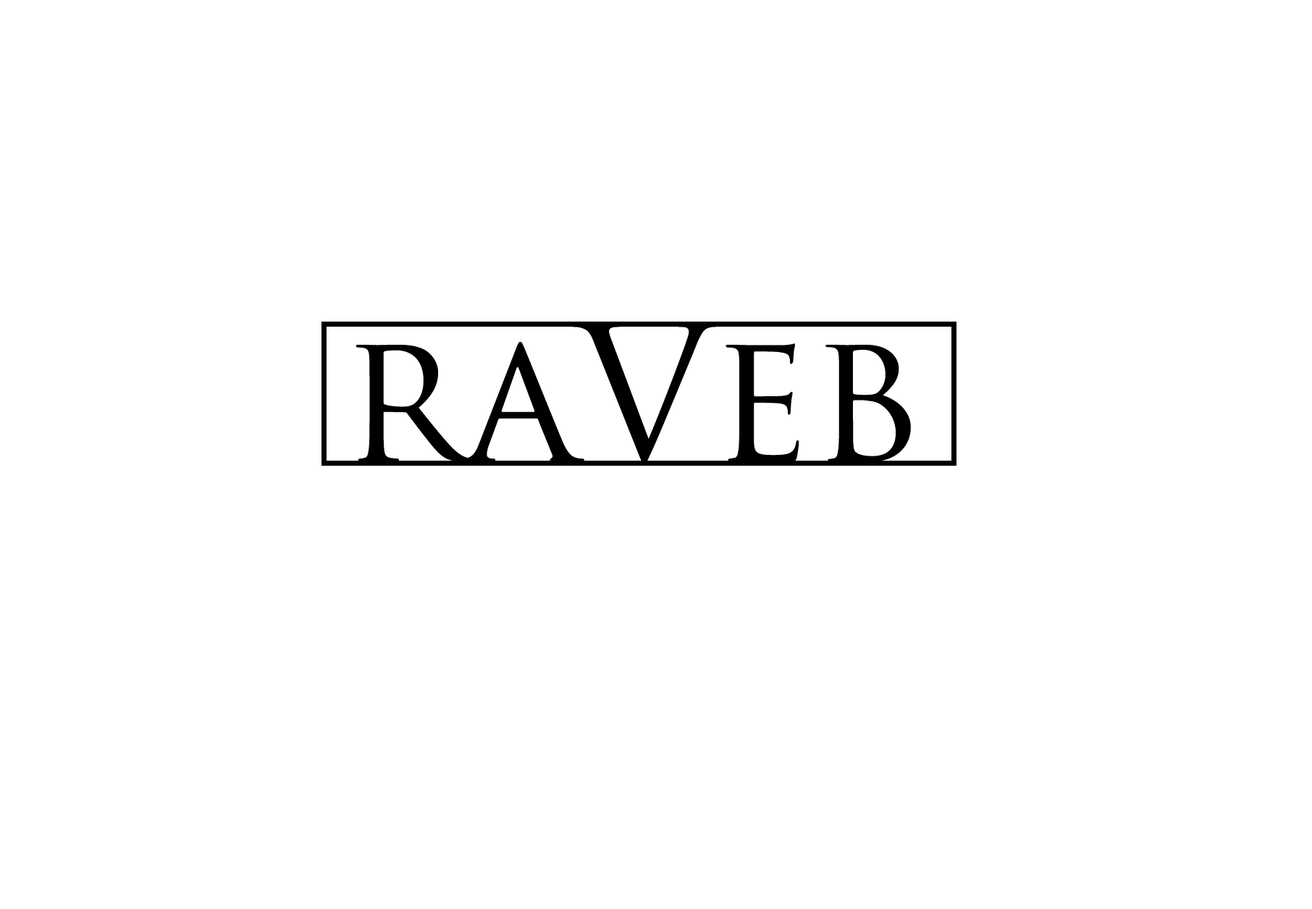
<style>
.page{position:relative;width:1312px;height:909px;background:#ffffff}
.page>*{position:absolute;margin:0}
.t1{font:181px "TrajanPro-Regular";color:#000000}
</style>
<div class="page">
<p class="t1" style="left:356px;top:324px;width:555px;height:140px">raVeb</p>
</div>
